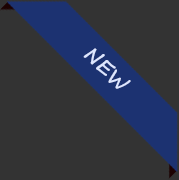
<style>
.page{position:relative;width:179px;height:180px;background:#333333}
.page>*{position:absolute;margin:0}
.t1{font:20px "SegoeScript-Bold";color:#dde6ff}
</style>
<div class="page">
<p class="t1" style="left:83px;top:48px;width:48px;height:41px;rotate:45deg">NEW</p>
</div>
